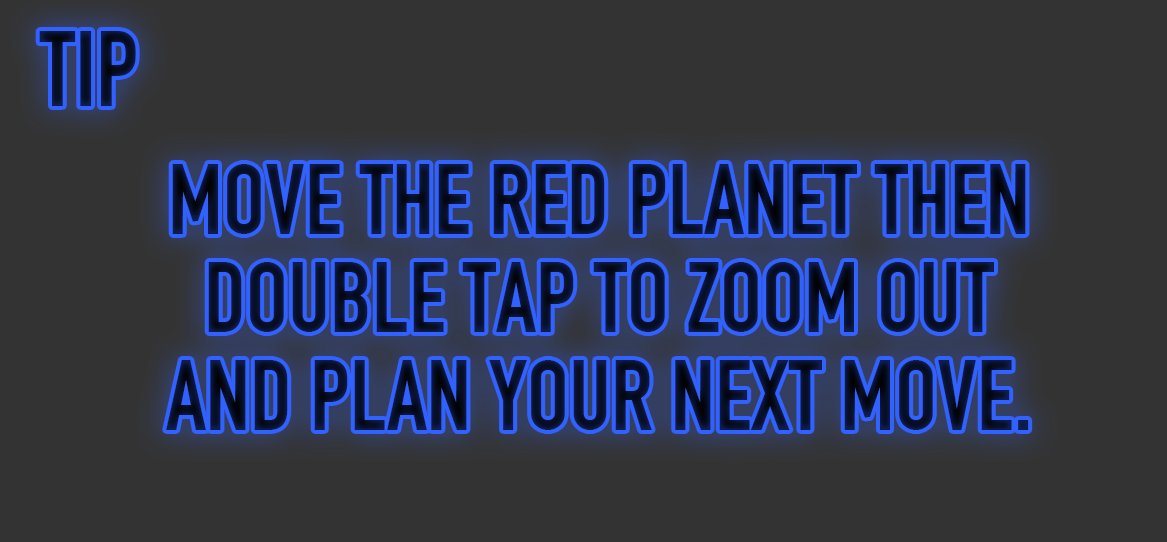
<style>
.page{position:relative;width:1167px;height:542px;background:#333333}
.page>*{position:absolute;margin:0}
.t1{font:104.7px "DINEngschrift";color:#08112c}
.t2{font:98.5px/97.9px "DINEngschrift";color:#09112d;text-transform:uppercase}
</style>
<div class="page">
<p class="t1" style="left:39px;top:31px;width:97px;height:75px">TIP</p>
<p class="t2" style="left:166px;top:164px;width:863px;height:266px;text-align:center">move the red planet then double tap to zoom out and plan your next move.</p>
</div>
